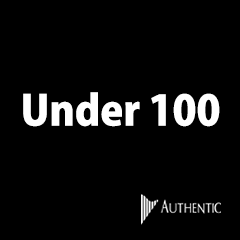
<style>
.page{position:relative;width:240px;height:240px;background:#000000}
.page>*{position:absolute;margin:0}
.t1{font:41.3px "KozGoPr6N-Heavy";color:#ffffff}
</style>
<div class="page">
<p class="t1" style="left:23px;top:92px;width:197px;height:35px">Under 100</p>
</div>
